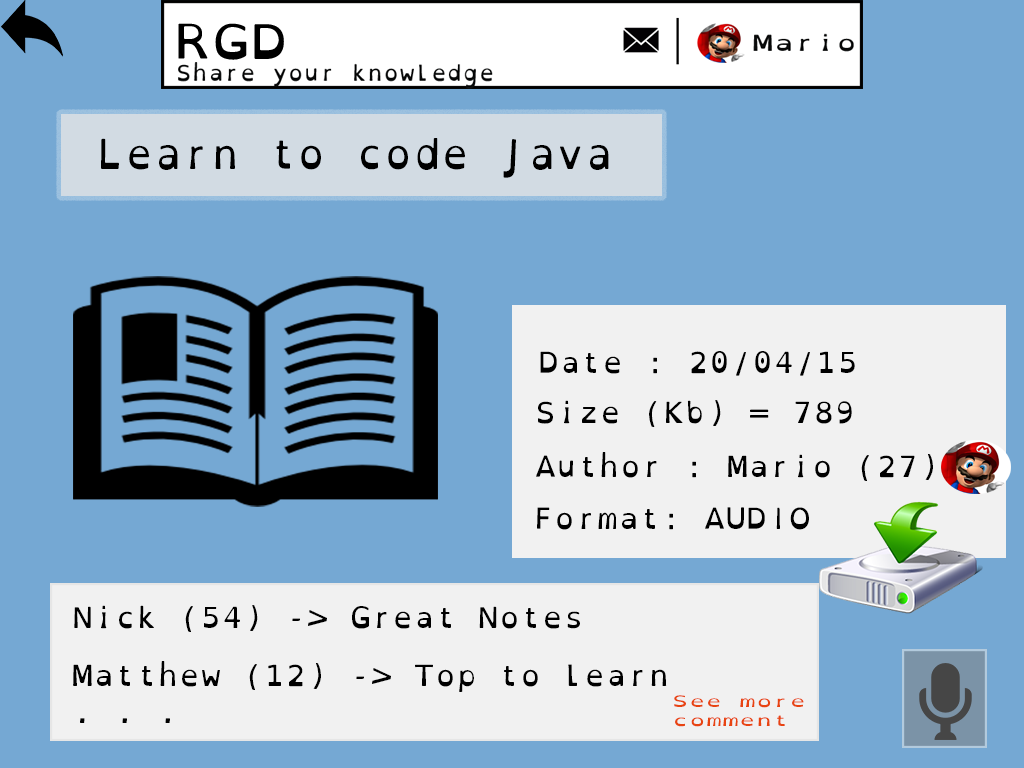
<style>
.page{position:relative;width:1024px;height:768px;background:#75a8d3}
.page>*{position:absolute;margin:0}
.t1{font:41.3px "OpenDyslexicMono-Regular";color:#000000;scale:0.95 1}
.t2{font:29.2px "OpenDyslexicMono-Regular";color:#000000}
.t3{font:15.5px "OpenDyslexicMono-Regular";color:#e84411;scale:1.48 1}
</style>
<div class="page">
<p class="t1" style="left:101px;top:138px;width:508px;height:40px">Learn to code Java</p>
<p class="t2" style="left:540px;top:351px;width:315px;height:25px">Date : 20/04/15</p>
<p class="t2" style="left:538px;top:400px;width:314px;height:27px">Size (Kb) = 789</p>
<p class="t2" style="left:536px;top:452px;width:397px;height:29px">Author : Mario (27)</p>
<p class="t2" style="left:537px;top:507px;width:272px;height:23px">Format: AUDIO</p>
<p class="t2" style="left:74px;top:605px;width:506px;height:27px">Nick (54) -&gt; Great Notes</p>
<p class="t2" style="left:73px;top:661px;width:594px;height:31px">Matthew (12) -&gt; Top to learn</p>
<p class="t3" style="left:674px;top:695px;width:130px;height:32px">See more <br>comment</p>
<p class="t2" style="left:80px;top:718px;width:90px;height:5px">. . .</p>
</div>
